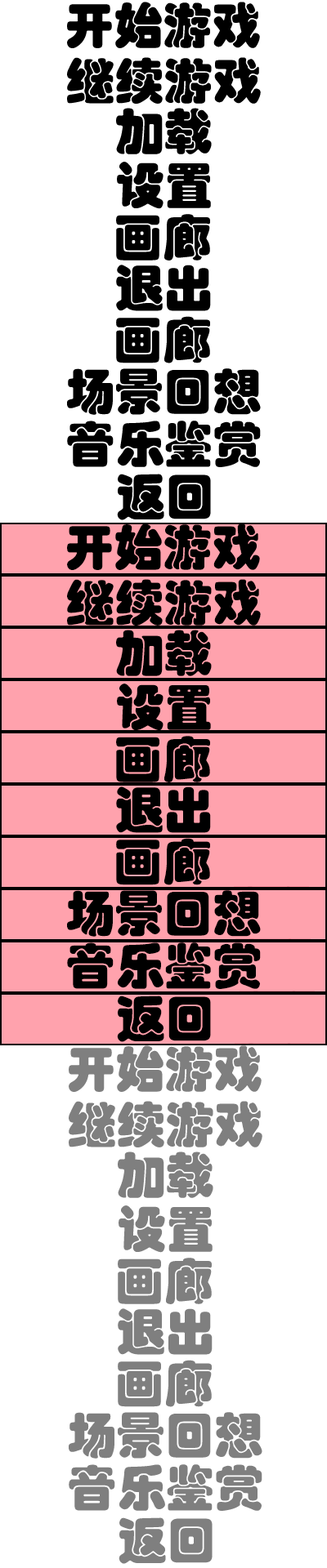
<style>
.page{position:relative;width:327px;height:1568px;background:#ffffff}
.page>*{position:absolute;margin:0}
.t1{font:49px "STHupo";color:#000000}
.t2{font:49px "STHupo";color:#7f7f7f}
</style>
<div class="page">
<p class="t1" style="left:67px;top:2px;width:193px;height:46px">开始游戏</p>
<p class="t1" style="left:67px;top:57px;width:194px;height:47px">继续游戏</p>
<p class="t1" style="left:116px;top:108px;width:96px;height:46px">加载</p>
<p class="t1" style="left:117px;top:162px;width:94px;height:47px">设置</p>
<p class="t1" style="left:116px;top:214px;width:94px;height:47px">画廊</p>
<p class="t1" style="left:116px;top:265px;width:95px;height:46px">退出</p>
<p class="t1" style="left:116px;top:316px;width:94px;height:47px">画廊</p>
<p class="t1" style="left:67px;top:368px;width:194px;height:47px">场景回想</p>
<p class="t1" style="left:67px;top:421px;width:194px;height:46px">音乐鉴赏</p>
<p class="t1" style="left:117px;top:474px;width:94px;height:46px">返回</p>
<p class="t1" style="left:67px;top:523px;width:193px;height:47px">开始游戏</p>
<p class="t1" style="left:67px;top:579px;width:194px;height:47px">继续游戏</p>
<p class="t1" style="left:116px;top:630px;width:96px;height:46px">加载</p>
<p class="t1" style="left:117px;top:684px;width:94px;height:47px">设置</p>
<p class="t1" style="left:116px;top:736px;width:94px;height:46px">画廊</p>
<p class="t1" style="left:116px;top:786px;width:95px;height:47px">退出</p>
<p class="t1" style="left:116px;top:838px;width:94px;height:47px">画廊</p>
<p class="t1" style="left:67px;top:890px;width:194px;height:47px">场景回想</p>
<p class="t1" style="left:67px;top:942px;width:194px;height:47px">音乐鉴赏</p>
<p class="t1" style="left:117px;top:996px;width:94px;height:46px">返回</p>
<p class="t2" style="left:69px;top:1045px;width:192px;height:47px">开始游戏</p>
<p class="t2" style="left:69px;top:1101px;width:193px;height:46px">继续游戏</p>
<p class="t2" style="left:118px;top:1152px;width:95px;height:46px">加载</p>
<p class="t2" style="left:118px;top:1205px;width:94px;height:48px">设置</p>
<p class="t2" style="left:118px;top:1258px;width:94px;height:46px">画廊</p>
<p class="t2" style="left:118px;top:1308px;width:94px;height:47px">退出</p>
<p class="t2" style="left:118px;top:1360px;width:94px;height:47px">画廊</p>
<p class="t2" style="left:69px;top:1412px;width:193px;height:47px">场景回想</p>
<p class="t2" style="left:69px;top:1464px;width:193px;height:47px">音乐鉴赏</p>
<p class="t2" style="left:118px;top:1517px;width:94px;height:47px">返回</p>
</div>
